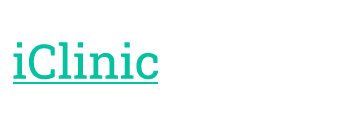
<style>
.page{position:relative;width:345px;height:126px;background:#ffffff}
.page>*{position:absolute;margin:0}
.t1{font:47.5px "RobotoSlab-Regular";color:#05c0a1}
</style>
<div class="page">
<p class="t1" style="left:13px;top:42px;width:145px;height:38px">iClinic</p>
</div>
